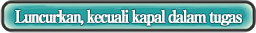
<style>
.page{position:relative;width:256px;height:33px}
.page>*{position:absolute;margin:0}
.t1{font:17px "RyuminPro-ExBold";letter-spacing:-0.12em;color:#ffffff;font-weight:bold;scale:0.9 1}
</style>
<div class="page">
<p class="t1" style="left:15px;top:9px;width:227px;height:17px">Luncurkan, kecuali kapal dalam tugas</p>
</div>
